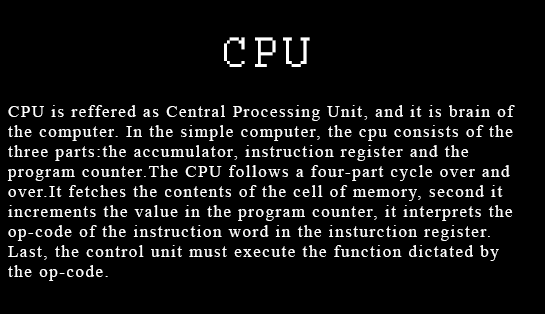
<style>
.page{position:relative;width:545px;height:314px;background:#000000}
.page>*{position:absolute;margin:0}
.t1{font:47.1px "Courier";letter-spacing:0.1em;color:#ffffff}
.t2{font:16.7px "TimesNewRomanPSMT";letter-spacing:0.1em;color:#ffffff}
</style>
<div class="page">
<p class="t1" style="left:224px;top:37px;width:86px;height:30px">CPU</p>
<p class="t2" style="left:7px;top:105px;width:508px;height:176px">CPU is reffered as Central Processing Unit, and it is brain of <br>the computer. In the simple computer, the cpu consists of the <br>three parts:the accumulator, instruction register and the <br>program counter.The CPU follows a four-part cycle over and<br>over.It fetches the contents of the cell of memory, second it<br>increments the value in the program counter, it interprets the<br>op-code of the instruction word in the insturction register.<br>Last, the control unit must execute the function dictated by<br>the op-code.</p>
</div>
